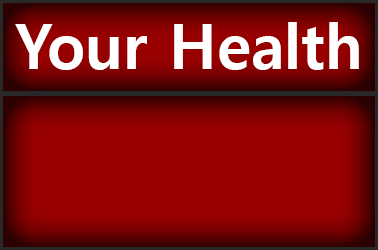
<style>
.page{position:relative;width:378px;height:250px;background:#980000}
.page>*{position:absolute;margin:0}
.t1{font:62px "MalgunGothicBold";color:#ffffff}
</style>
<div class="page">
<p class="t1" style="left:15px;top:22px;width:344px;height:48px">Your Health</p>
</div>
